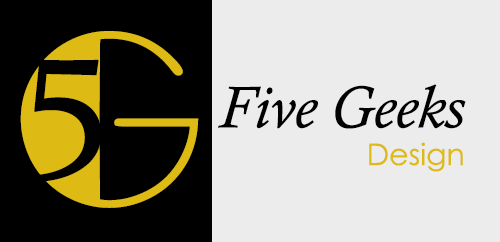
<style>
.page{position:relative;width:500px;height:242px;background:#ececec}
.page>*{position:absolute;margin:0}
.t1{font:250px "Broadway";color:#ddba14}
.t2{font:180px "Constantia";color:#010101}
.t3{font:60px "CalistoMT-Italic";color:#010101}
.t4{font:30px "CenturyGothic";color:#ddba14}
</style>
<div class="page">
<p class="t1" style="left:20px;top:31px;width:179px;height:177px">G</p>
<p class="t2" style="left:30px;top:59px;width:72px;height:123px">5</p>
<p class="t3" style="left:218px;top:84px;width:248px;height:45px">Five Geeks</p>
<p class="t4" style="left:369px;top:142px;width:94px;height:30px">Design</p>
</div>
